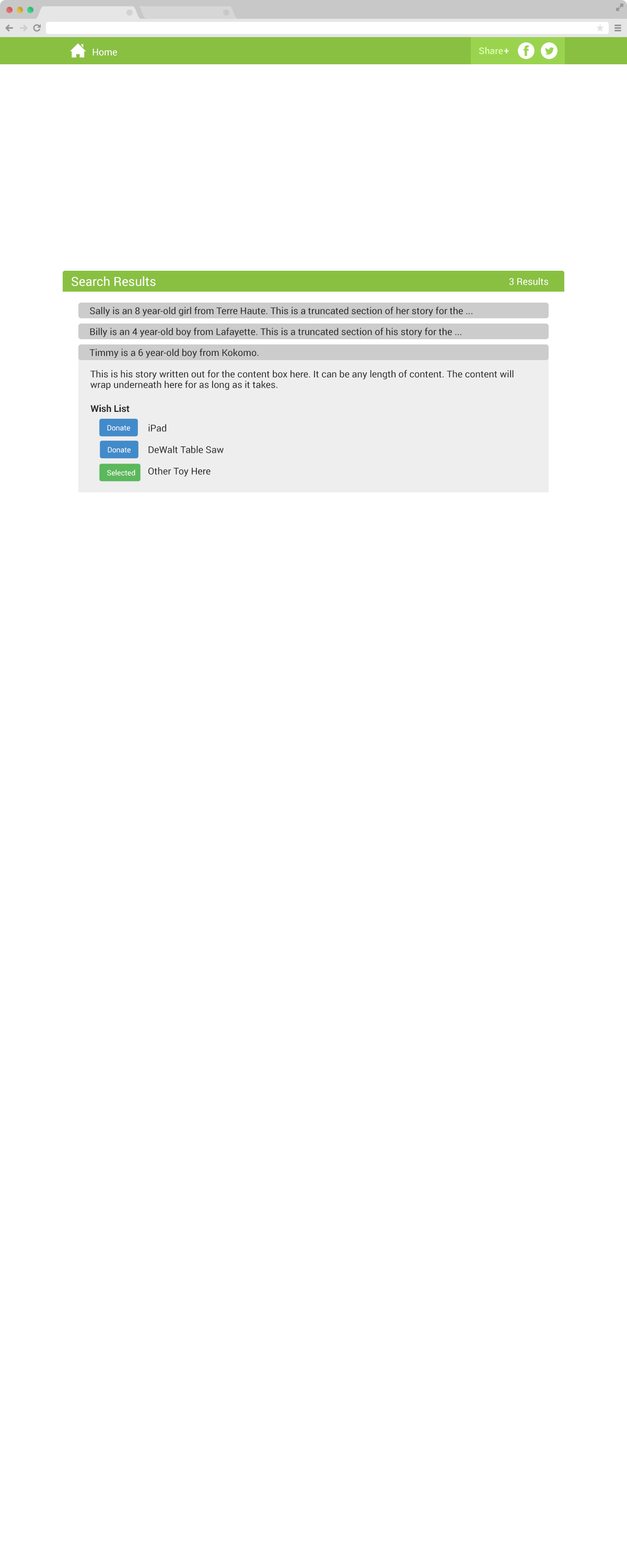
<style>
.page{position:relative;width:627px;height:1568px;background:#ffffff}
.page>*{position:absolute;margin:0}
.t1{font:12.5px "Roboto-Regular";color:#ffffff}
.t2{font:9.4px "Roboto-Regular";color:#ffffff}
.t3{font:9.4px "Roboto-Regular";color:#252525}
.t4{font:9.4px/10.5px "Roboto-Regular";color:#252525}
.t5{font:9.4px "Roboto-Bold";color:#252525}
.t6{font:9.4px/21.5px "Roboto-Regular";color:#252525}
</style>
<div class="page">
<p class="t1" style="left:72px;top:276px;width:84px;height:10px">Search Results</p>
<p class="t2" style="left:510px;top:278px;width:38px;height:7px">3 Results</p>
<p class="t3" style="left:90px;top:307px;width:382px;height:9px">Sally is an 8 year-old girl from Terre Haute. This is a truncated section of her story for the ...</p>
<p class="t3" style="left:90px;top:328px;width:372px;height:9px">Billy is an 4 year-old boy from Lafayette. This is a truncated section of his story for the ...</p>
<p class="t3" style="left:89px;top:349px;width:170px;height:9px">Timmy is a 6 year-old boy from Kokomo.</p>
<p class="t4" style="left:90px;top:370px;width:424px;height:20px">This is his story written out for the content box here. It can be any length of content. The content will<br>wrap underneath here for as long as it takes.</p>
<p class="t5" style="left:90px;top:405px;width:40px;height:7px">Wish List</p>
<p class="t6" style="left:148px;top:424px;width:76px;height:53px"><span class="t4"> </span>iPad<br> DeWalt Table Saw<br> Other Toy Here</p>
</div>
